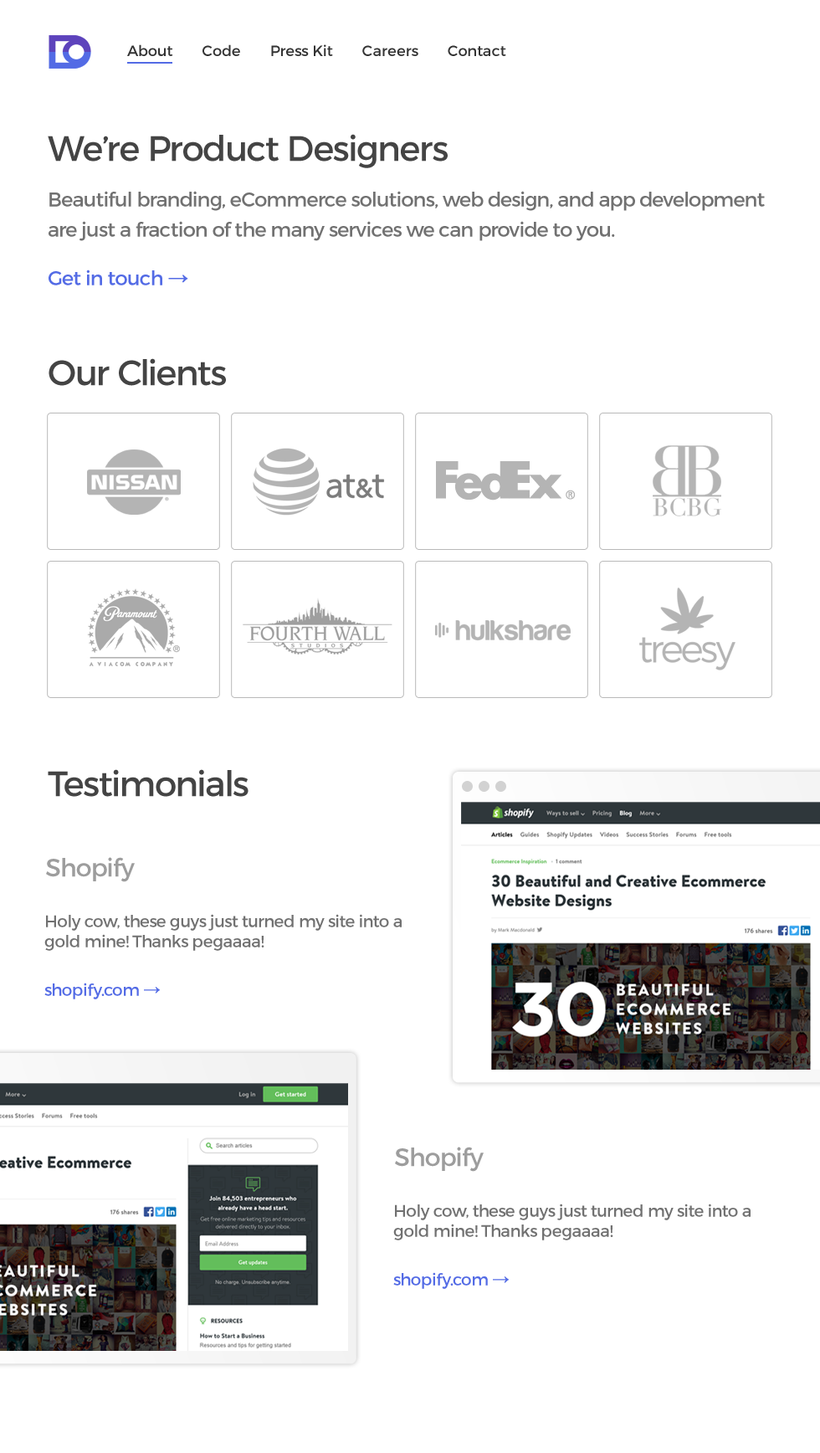
<style>
.page{position:relative;width:820px;height:1453px;background:#ffffff}
.page>*{position:absolute;margin:0}
.t1{font:15.1px "Montserrat-Regular";color:#333333}
.t2{font:35.2px "Montserrat-Regular";letter-spacing:-0.025em;color:#444444}
.t3{font:20.1px/30.1px "Montserrat-Regular";letter-spacing:-0.025em;color:#717171}
.t4{font:20.1px/48.6px "Montserrat-Regular";letter-spacing:-0.025em;color:#536be5}
.t5{font:20.1px/48.6px "Arial-BoldMT";letter-spacing:-0.025em;color:#536be5;font-weight:bold}
.t6{font:25.1px "Montserrat-Regular";letter-spacing:-0.025em;color:#9d9d9d}
.t7{font:16.7px/20.1px "Montserrat-Regular";letter-spacing:-0.025em;color:#717171}
.t8{font:16.7px/48.6px "Montserrat-Regular";letter-spacing:-0.025em;color:#536be5}
.t9{font:16.7px/48.6px "Arial-BoldMT";letter-spacing:-0.025em;color:#536be5;font-weight:bold}
</style>
<div class="page">
<p class="t1" style="left:127px;top:44px;width:380px;height:12px">About       Code       Press Kit       Careers       Contact</p>
<p class="t2" style="left:48px;top:134px;width:400px;height:34px">We’re Product Designers</p>
<p class="t3" style="left:49px;top:191px;width:716px;height:94px">Beautiful branding, eCommerce solutions, web design, and app development are just a fraction of the many services we can provide to you.<br><span class="t4">Get in touch </span><span class="t5">→</span></p>
<p class="t2" style="left:49px;top:358px;width:177px;height:28px">Our Clients</p>
<p class="t2" style="left:48px;top:769px;width:201px;height:28px">Testimonials</p>
<p class="t6" style="left:46px;top:857px;width:89px;height:25px">Shopify</p>
<p class="t7" style="left:44px;top:914px;width:358px;height:86px">Holy cow, these guys just turned my site into a gold mine! Thanks pegaaaa!<br><span class="t8">shopify.com </span><span class="t9">→</span></p>
<p class="t6" style="left:395px;top:1147px;width:89px;height:25px">Shopify</p>
<p class="t7" style="left:393px;top:1204px;width:358px;height:85px">Holy cow, these guys just turned my site into a gold mine! Thanks pegaaaa!<br><span class="t8">shopify.com </span><span class="t9">→</span></p>
</div>
